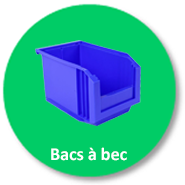
<style>
.page{position:relative;width:185px;height:185px;background:#00cc66}
.page>*{position:absolute;margin:0}
.t1{font:18px "Calibri-Bold";color:#ffffff}
</style>
<div class="page">
<p class="t1" style="left:51px;top:147px;width:76px;height:14px">Bacs à bec</p>
</div>
